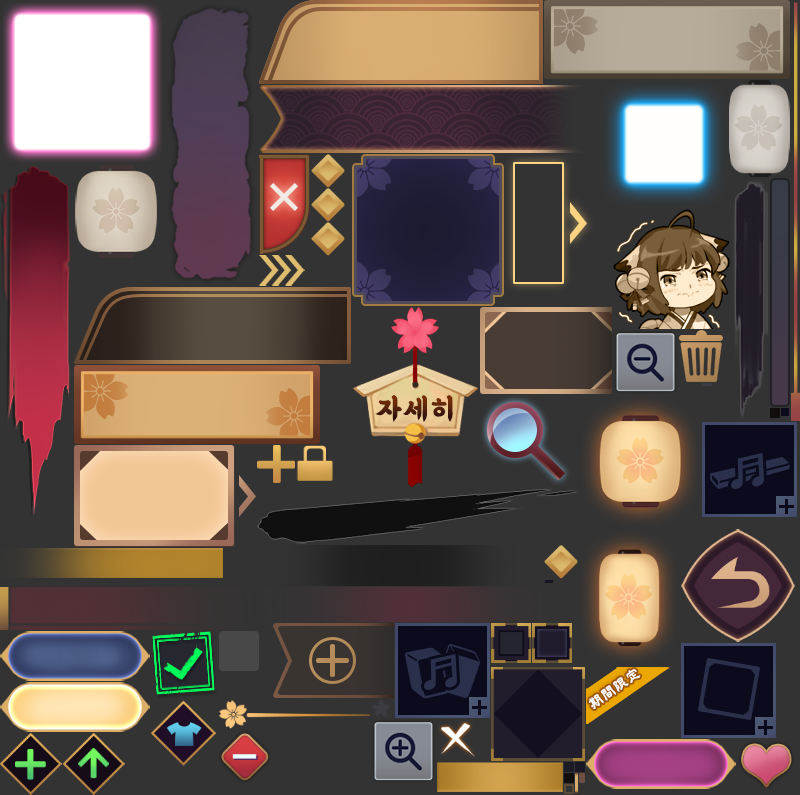
<style>
.page{position:relative;width:800px;height:795px;background:#333333}
.page>*{position:absolute;margin:0}
.t1{font:29.2px "BMEULJIROTTF";letter-spacing:0.06em}
</style>
<div class="page">
<p class="t1" style="left:375px;top:395px;width:78px;height:27px">자세히</p>
</div>
